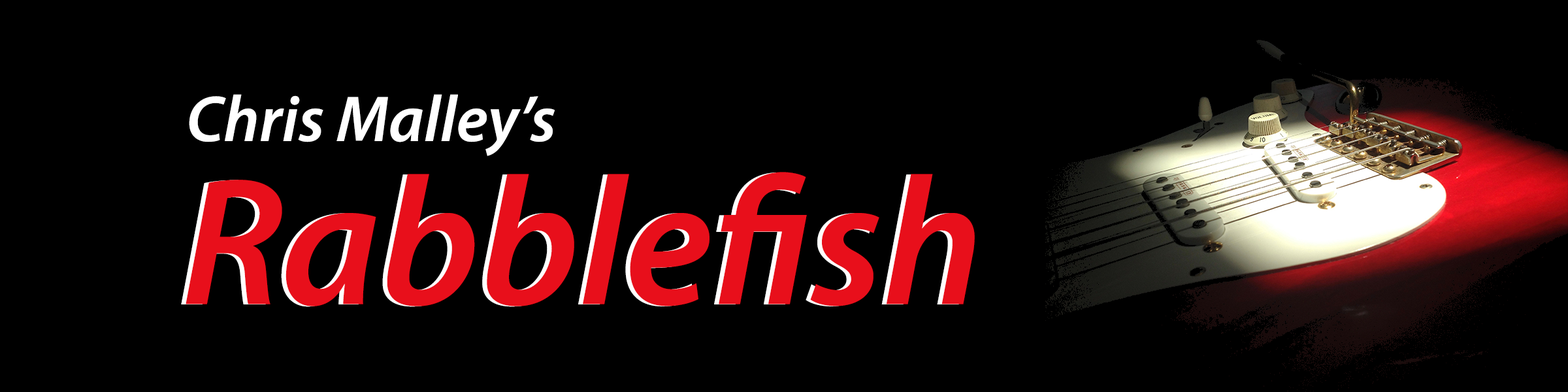
<style>
.page{position:relative;width:1568px;height:392px;background:#000000}
.page>*{position:absolute;margin:0}
.t1{font:65.3px "MyriadPro-SemiboldIt";color:#ffffff}
.t2{font:182.9px "MyriadPro-SemiboldIt";color:#e80f1b}
</style>
<div class="page">
<p class="t1" style="left:189px;top:94px;width:366px;height:62px">Chris Malley’s</p>
<p class="t2" style="left:181px;top:172px;width:789px;height:135px">Rabblefish</p>
<p class="t2" style="left:186px;top:172px;width:789px;height:134px">Rabblefish</p>
</div>
